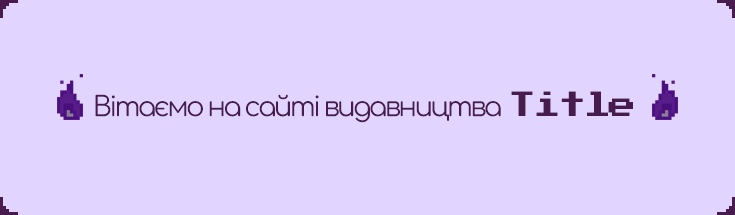
<style>
.page{position:relative;width:735px;height:215px;background:#e1d5ff}
.page>*{position:absolute;margin:0}
.t1{font:27.5px "Comfortaa-Regular";letter-spacing:-0.1em;color:#471b4b}
.t2{font:28px "PressStart2P-Regular";letter-spacing:-0.1em;color:#471b4b}
</style>
<div class="page">
<p class="t1" style="left:95px;top:94px;width:406px;height:29px">Вітаємо на сайті видавництва</p>
<p class="t2" style="left:511px;top:91px;width:122px;height:25px">Title</p>
</div>
